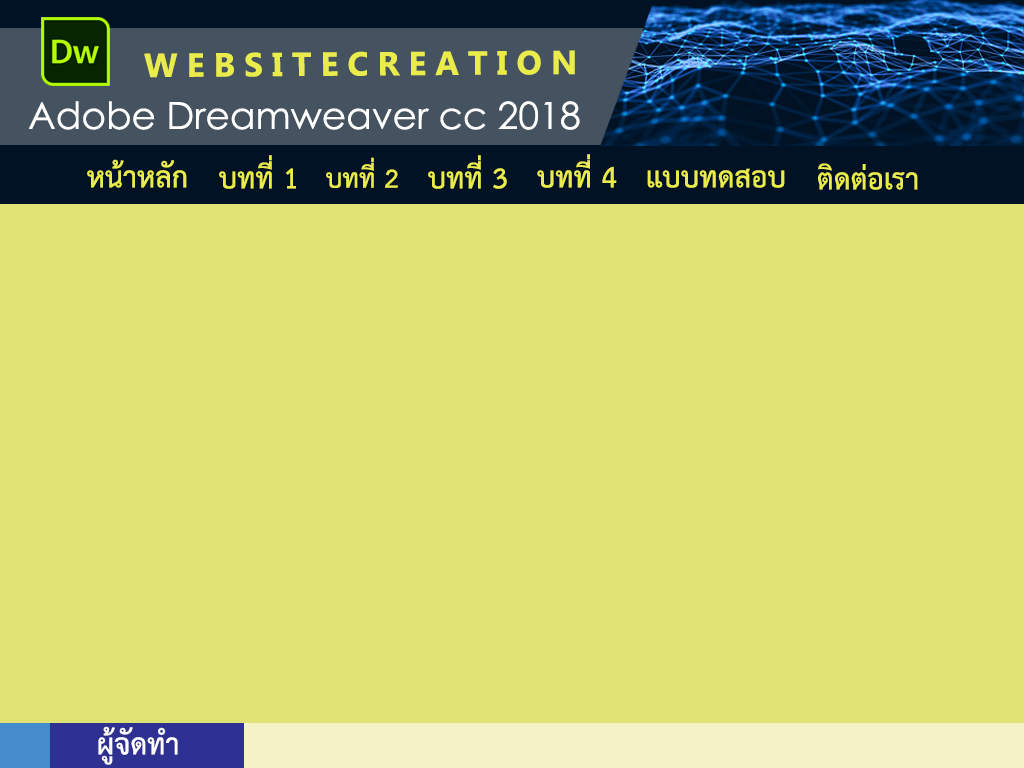
<style>
.page{position:relative;width:1024px;height:768px;background:#e1e274}
.page>*{position:absolute;margin:0}
.t1{font:33.3px "MicrosoftNewTaiLue-Bold";color:#eaec4b}
.t2{font:37.5px "CenturyGothic";color:#ffffff}
.t3{font:41.7px "THSarabunPSK-Bold";color:#eaec4b}
.t4{font:37.8px "THSarabunPSK-Bold";color:#eaec4b}
.t5{font:41.7px "THSarabunPSK-Bold";color:#ffffff}
</style>
<div class="page">
<p class="t1" style="left:144px;top:50px;width:431px;height:28px">W E B S I T E C R E A T I O N</p>
<p class="t2" style="left:28px;top:101px;width:552px;height:29px">Adobe Dreamweaver cc 2018</p>
<p class="t3" style="left:87px;top:159px;width:100px;height:29px">หน้าหลัก</p>
<p class="t3" style="left:219px;top:155px;width:77px;height:34px">บทที่ 1</p>
<p class="t4" style="left:326px;top:157px;width:72px;height:31px">บทที่ 2</p>
<p class="t3" style="left:428px;top:155px;width:79px;height:34px">บทที่ 3</p>
<p class="t3" style="left:537px;top:154px;width:80px;height:34px">บทที่ 4</p>
<p class="t3" style="left:647px;top:168px;width:138px;height:20px">แบบทดสอบ</p>
<p class="t3" style="left:818px;top:163px;width:100px;height:27px">ติดต่อเรา</p>
<p class="t5" style="left:98px;top:726px;width:80px;height:39px">ผู้จัดทำ</p>
</div>
